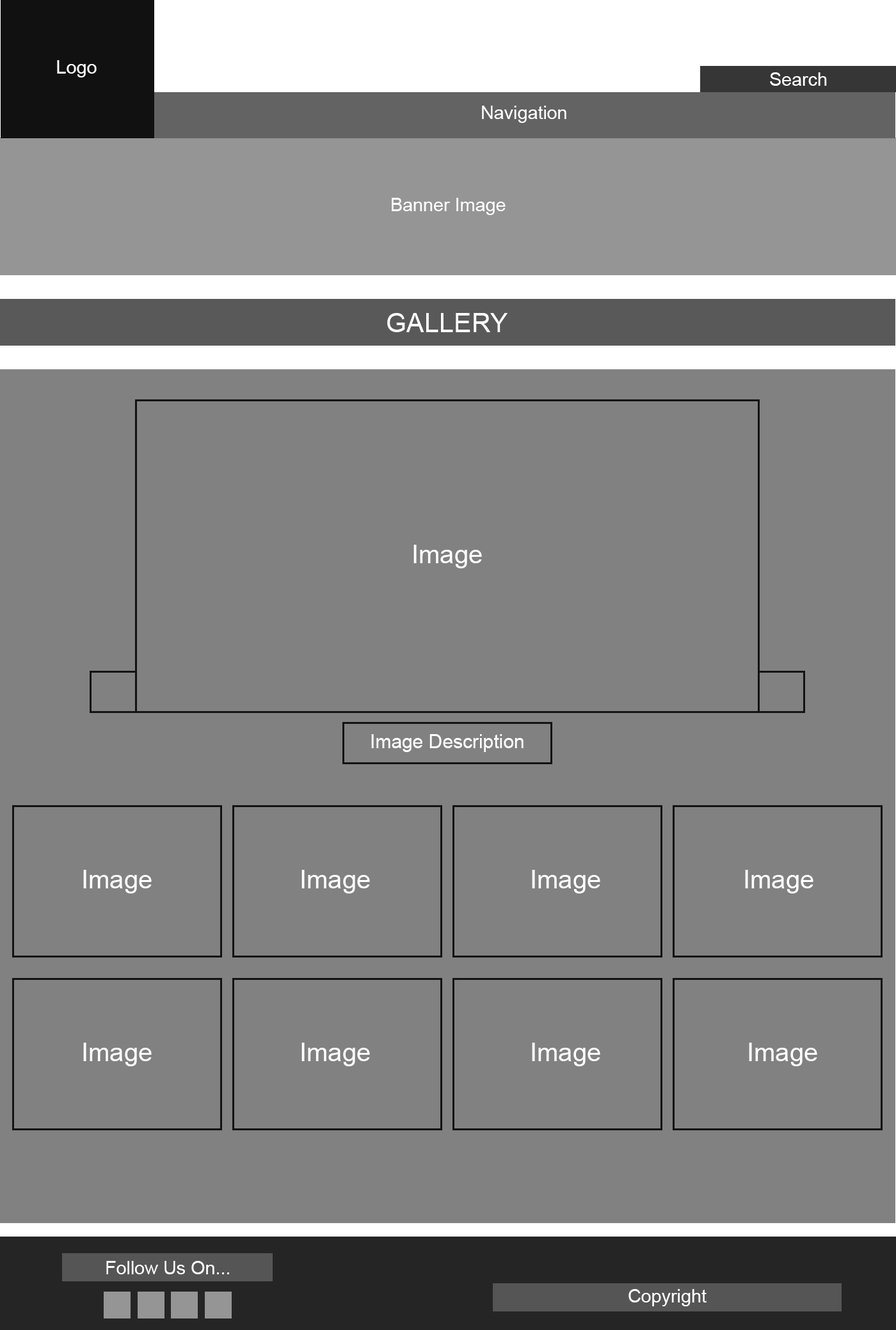
<style>
.page{position:relative;width:896px;height:1330px;background:#818181}
.page>*{position:absolute;margin:0}
.t1{font:18.4px "ArialMT";color:#ffffff}
.t2{font:26.5px "ArialMT";color:#ffffff}
.t3{font:25.6px "ArialMT";color:#ffffff}
.t4{font:19.2px "ArialMT";color:#ffffff}
</style>
<div class="page">
<p class="t1" style="left:57px;top:60px;width:40px;height:17px">Logo</p>
<p class="t1" style="left:770px;top:72px;width:57px;height:14px">Search</p>
<p class="t1" style="left:482px;top:106px;width:85px;height:17px">Navigation</p>
<p class="t1" style="left:392px;top:198px;width:114px;height:17px">Banner Image</p>
<p class="t2" style="left:387px;top:313px;width:121px;height:19px">GALLERY</p>
<p class="t3" style="left:414px;top:545px;width:68px;height:24px">Image</p>
<p class="t4" style="left:371px;top:734px;width:153px;height:18px">Image Description</p>
<p class="t3" style="left:83px;top:870px;width:69px;height:24px">Image</p>
<p class="t3" style="left:302px;top:870px;width:68px;height:24px">Image</p>
<p class="t3" style="left:532px;top:870px;width:69px;height:24px">Image</p>
<p class="t3" style="left:745px;top:870px;width:69px;height:24px">Image</p>
<p class="t3" style="left:83px;top:1043px;width:69px;height:24px">Image</p>
<p class="t3" style="left:302px;top:1043px;width:68px;height:24px">Image</p>
<p class="t3" style="left:532px;top:1043px;width:69px;height:24px">Image</p>
<p class="t3" style="left:749px;top:1043px;width:69px;height:24px">Image</p>
<p class="t1" style="left:106px;top:1261px;width:123px;height:14px">Follow Us On...</p>
<p class="t1" style="left:629px;top:1289px;width:78px;height:18px">Copyright</p>
</div>
